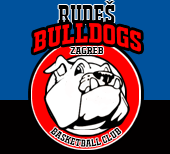
<style>
.page{position:relative;width:170px;height:154px;background:#00529c}
.page>*{position:absolute;margin:0}
.t1{font:26.2px "JACKPORTREGULARNCV";color:#010000}
.t2{font:28.6px "JACKPORTREGULARNCV";color:#ff0000}
.t3{font:9px "JACKPORTREGULARNCV";color:#010000;scale:1.4 1}
.t4{font:9.6px "JACKPORTREGULARNCV";color:#010000}
</style>
<div class="page">
<p class="t1" style="left:58px;top:1px;width:57px;height:23px">rudeš</p>
<p class="t2" style="left:33px;top:23px;width:109px;height:30px">bulldogs</p>
<p class="t3" style="left:70px;top:47px;width:34px;height:7px">zagreb</p>
<p class="t4" style="left:50px;top:127px;width:72px;height:20px">basketball club</p>
</div>
